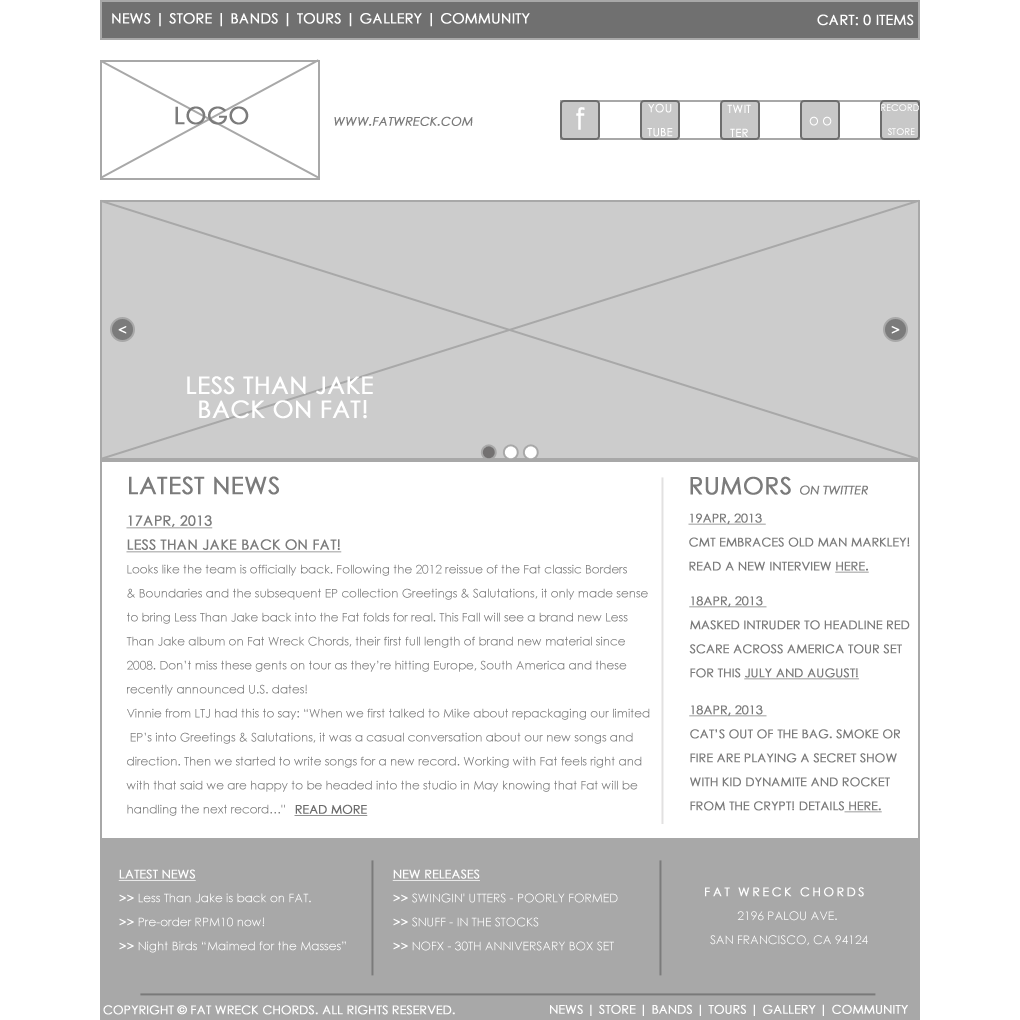
<style>
.page{position:relative;width:1020px;height:1020px;background:#ffffff}
.page>*{position:absolute;margin:0}
.t1{font:14px "CenturyGothic";color:#ffffff;text-transform:uppercase;font-weight:bold}
.t2{font:24px "CenturyGothic";color:#7b7b7b;text-transform:uppercase;font-weight:bold}
.t3{font:30px "CenturyGothic";color:#ffffff;font-weight:bold}
.t4{font:11px/24px "CenturyGothic";color:#ffffff;text-transform:uppercase;font-weight:bold}
.t5{font:9px/24px "CenturyGothic";color:#ffffff;text-transform:uppercase;font-weight:bold}
.t6{font:12px "CenturyGothic";color:#7b7b7b;text-transform:uppercase;font-weight:bold;font-style:italic}
.t7{font:11px "CenturyGothic";color:#ffffff;text-transform:uppercase;font-weight:bold}
.t8{font:24px/24px "CenturyGothic";color:#ffffff;text-transform:uppercase;font-weight:bold}
.t9{font:12px "CenturyGothic-Italic";color:#7b7b7b;text-transform:uppercase;font-weight:bold}
.t10{font:14px/24px "CenturyGothic";color:#7b7b7b;text-transform:uppercase;font-weight:bold;text-decoration:underline}
.t11{font:12px/24px "CenturyGothic";color:#7b7b7b;text-transform:uppercase;font-weight:bold}
.t12{font:12px/24px "CenturyGothic";color:#7b7b7b;text-transform:uppercase;font-weight:bold;text-decoration:underline}
.t13{font:12px/24px "CenturyGothic";letter-spacing:-0.005em;color:#7b7b7b}
.t14{font:12px/24px "CenturyGothic";letter-spacing:-0.005em;color:#6c6c6c;text-transform:uppercase;font-weight:bold;text-decoration:underline}
.t15{font:12px/24px "CenturyGothic";color:#ffffff}
.t16{font:12px/24px "CenturyGothic";color:#ffffff;text-transform:uppercase;font-weight:bold;text-decoration:underline}
.t17{font:12px/24px "CenturyGothic";color:#ffffff;font-weight:bold}
.t18{font:12px/24px "CenturyGothic";color:#ffffff;text-transform:uppercase;font-weight:bold}
.t19{font:12px/24px "CenturyGothic";color:#ffffff;text-transform:uppercase}
.t20{font:12px/24px "CenturyGothic";letter-spacing:0.2em;color:#ffffff;text-transform:uppercase;font-weight:bold}
.t21{font:12px "CenturyGothic";color:#ffffff;text-transform:uppercase;font-weight:bold}
</style>
<div class="page">
<p class="t1" style="left:112px;top:13px;width:418px;height:14px">News | Store | Bands | Tours | Gallery | Community</p>
<p class="t1" style="left:817px;top:14px;width:97px;height:12px">cart: 0 items</p>
<p class="t2" style="left:175px;top:106px;width:74px;height:19px">Logo</p>
<p class="t3" style="left:576px;top:107px;width:9px;height:23px">f</p>
<p class="t4" style="left:647px;top:103px;width:26px;height:34px;text-align:center">You<br>Tube</p>
<p class="t4" style="left:727px;top:104px;width:24px;height:33px;text-align:center">twit<br>ter</p>
<p class="t5" style="left:881px;top:104px;width:38px;height:31px;text-align:center">record<br> store</p>
<p class="t6" style="left:334px;top:116px;width:139px;height:10px">www.fatwreck.com</p>
<p class="t7" style="left:809px;top:116px;width:23px;height:10px">O O</p>
<p class="t1" style="left:118px;top:326px;width:9px;height:8px">&lt;</p>
<p class="t1" style="left:891px;top:326px;width:9px;height:8px">&gt;</p>
<p class="t8" style="left:187px;top:376px;width:186px;height:43px;text-align:center">Less Than Jake <br>back on FAT!</p>
<p class="t2" style="left:129px;top:476px;width:150px;height:19px">latest News</p>
<p class="t9" style="left:690px;top:476px;width:178px;height:19px"><span class="t2">rumors </span>on twitter</p>
<p class="t10" style="left:126px;top:515px;width:216px;height:38px">17Apr, 2013<br>Less Than Jake back on FAT!</p>
<p class="t11" style="left:688px;top:513px;width:222px;height:60px"><span class="t12">19Apr, 2013 <br></span>CMT embraces Old Man Markley! <br>Read a new interview <span class="t12">here.</span></p>
<p class="t13" style="left:126px;top:564px;width:524px;height:252px">Looks like the team is officially back. Following the 2012 reissue of the Fat classic Borders <br>&amp; Boundaries and the subsequent EP collection Greetings &amp; Salutations, it only made sense <br>to bring Less Than Jake back into the Fat folds for real. This Fall will see a brand new Less <br>Than Jake album on Fat Wreck Chords, their first full length of brand new material since <br>2008. Don’t miss these gents on tour as they’re hitting Europe, South America and these <br>recently announced U.S. dates!<br>Vinnie from LTJ had this to say: “When we first talked to Mike about repackaging our limited<br> EP’s into Greetings &amp; Salutations, it was a casual conversation about our new songs and <br>direction. Then we started to write songs for a new record. Working with Fat feels right and <br>with that said we are happy to be headed into the studio in May knowing that Fat will be <br>handling the next record…"   <span class="t14">read more</span></p>
<p class="t11" style="left:689px;top:596px;width:221px;height:84px"><span class="t12">18Apr, 2013 <br></span>Masked Intruder to headline Red <br>Scare Across America tour set <br>for this <span class="t12">July and August!</span></p>
<p class="t11" style="left:689px;top:705px;width:211px;height:108px"><span class="t12">18Apr, 2013 <br></span>Cat’s out of the bag. Smoke or <br>Fire are playing a secret show <br>with Kid Dynamite and Rocket <br>From The Crypt! Details<span class="t12"> here.</span></p>
<p class="t15" style="left:118px;top:869px;width:228px;height:84px"><span class="t16">latest news<br></span><span class="t17">&gt;&gt; </span>Less Than Jake is back on FAT.<br><span class="t18">&gt;&gt; </span>Pre-order RPM10 now!<br><span class="t17">&gt;&gt; </span>Night Birds “Maimed for the Masses”</p>
<p class="t19" style="left:392px;top:869px;width:226px;height:82px"><span class="t16">new releases<br></span><span class="t17">&gt;&gt; </span>Swingin' Utters - Poorly Formed<br><span class="t18">&gt;&gt; </span>Snuff - In the Stocks<br><span class="t17">&gt;&gt; </span>nofx - 30th Anniversary Box Set</p>
<p class="t19" style="left:705px;top:887px;width:163px;height:59px;text-align:center"><span class="t20">FAT WRECK CHORDS  <br></span>2196 Palou Ave. <br>San Francisco, CA 94124</p>
<p class="t21" style="left:103px;top:1005px;width:352px;height:10px">Copyright © Fat Wreck Chords. All rights reserved.</p>
<p class="t21" style="left:550px;top:1004px;width:358px;height:12px">News | Store | Bands | Tours | gallery | Community</p>
</div>
